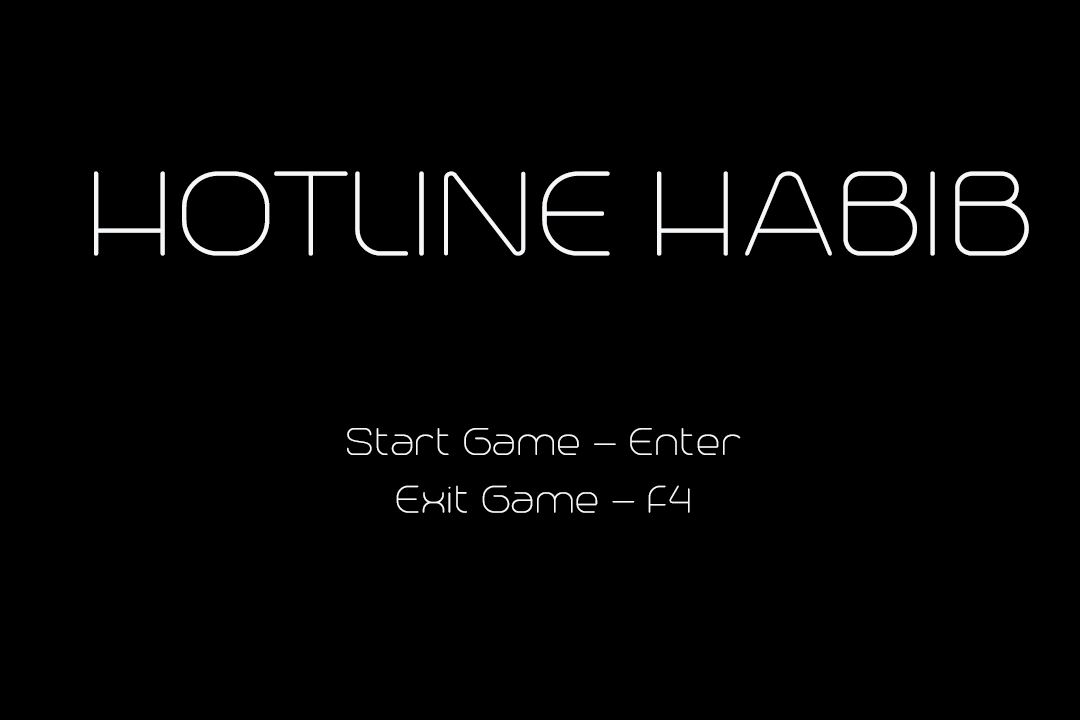
<style>
.page{position:relative;width:1080px;height:720px;background:#000000}
.page>*{position:absolute;margin:0}
.t1{font:150px "Trench-Thin";color:#f5f7f9}
.t2{font:48px "Trench-Thin";color:#f5f7f9}
</style>
<div class="page">
<p class="t1" style="left:94px;top:171px;width:935px;height:85px">HOTLINE HABIB</p>
<p class="t2" style="left:347px;top:428px;width:394px;height:85px;text-align:center">Start Game - Enter<br>Exit Game - F4</p>
</div>
